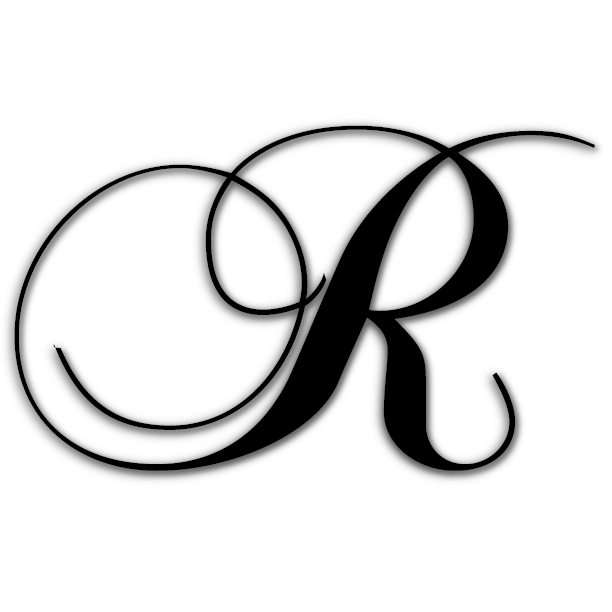
<style>
.page{position:relative;width:612px;height:612px;background:#ffffff}
.page>*{position:absolute;margin:0}
.t1{font:470px "ChopinScript";color:#000000}
</style>
<div class="page">
<p class="t1" style="left:14px;top:125px;width:581px;height:346px">R</p>
</div>
